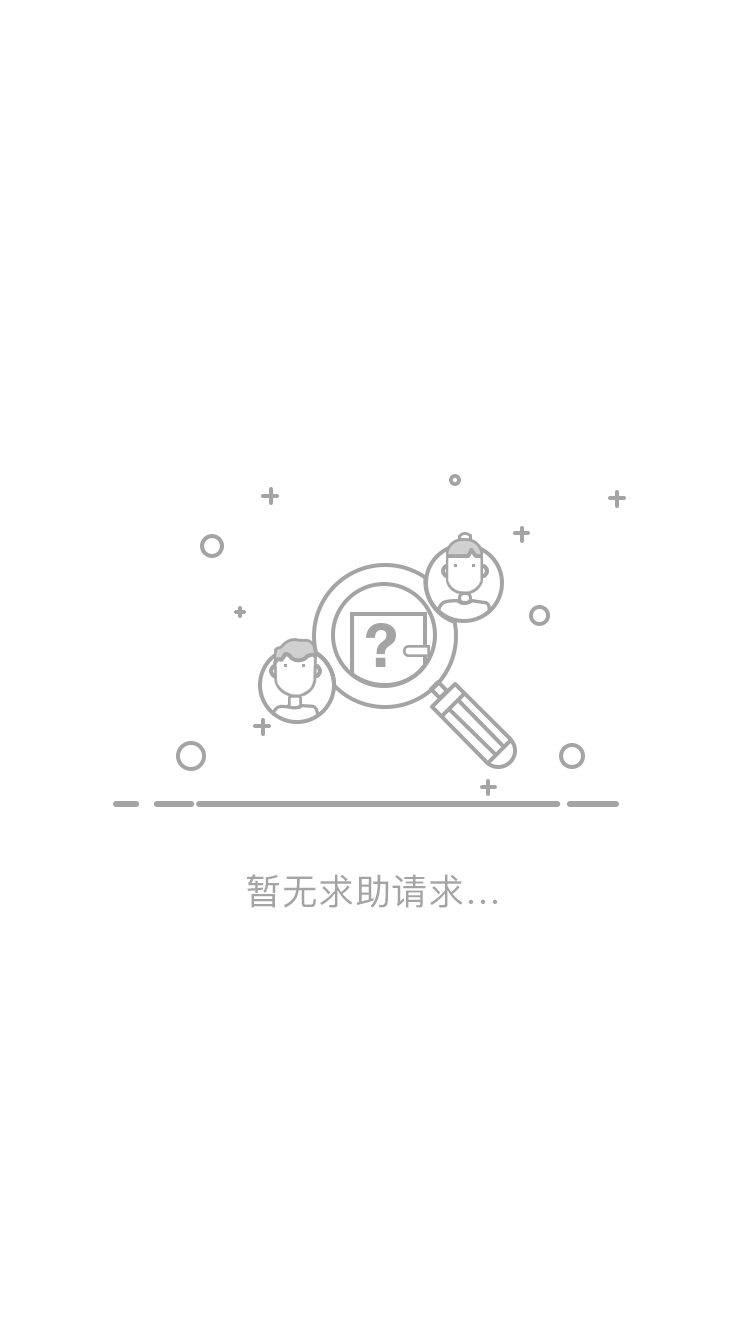
<style>
.page{position:relative;width:750px;height:1334px;background:#ffffff}
.page>*{position:absolute;margin:0}
.t1{font:36px "PingFang-SC-Medium";letter-spacing:0.005em;color:#a4a4a4}
</style>
<div class="page">
<p class="t1" style="left:247px;top:874px;width:251px;height:34px">暂无求助请求…</p>
</div>
